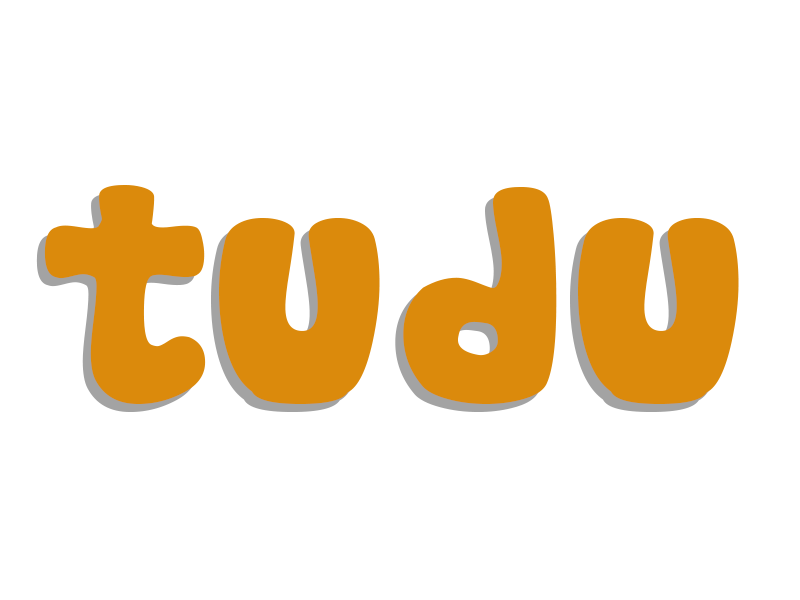
<style>
.page{position:relative;width:800px;height:600px;background:#ffffff}
.page>*{position:absolute;margin:0}
.t1{font:300px "Cookies";color:#db8a0c}
</style>
<div class="page">
<p class="t1" style="left:44px;top:185px;width:695px;height:219px">tudu</p>
<p class="t1" style="left:36px;top:193px;width:695px;height:219px">tudu</p>
</div>
